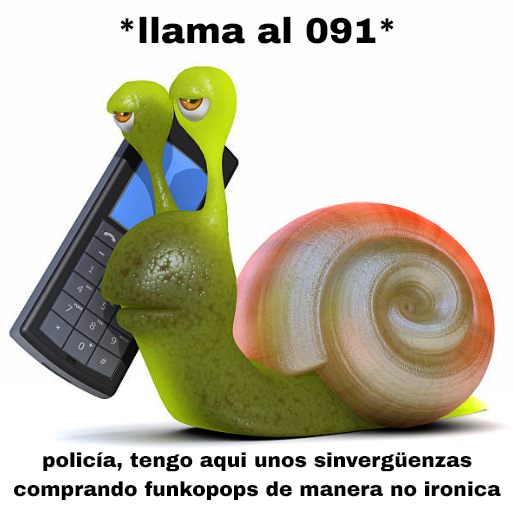
<style>
.page{position:relative;width:514px;height:514px;background:#fefefe}
.page>*{position:absolute;margin:0}
.t1{font:35.9px "ArchivoBlack-Regular";color:#000000}
.t2{font:20.3px "ArchivoBlack-Regular";color:#000000}
</style>
<div class="page">
<p class="t1" style="left:120px;top:16px;width:274px;height:28px">*llama al 091*</p>
<p class="t2" style="left:14px;top:452px;width:487px;height:48px;text-align:center">policía, tengo aqui unos sinvergüenzas<br>comprando funkopops de manera no ironica</p>
</div>
